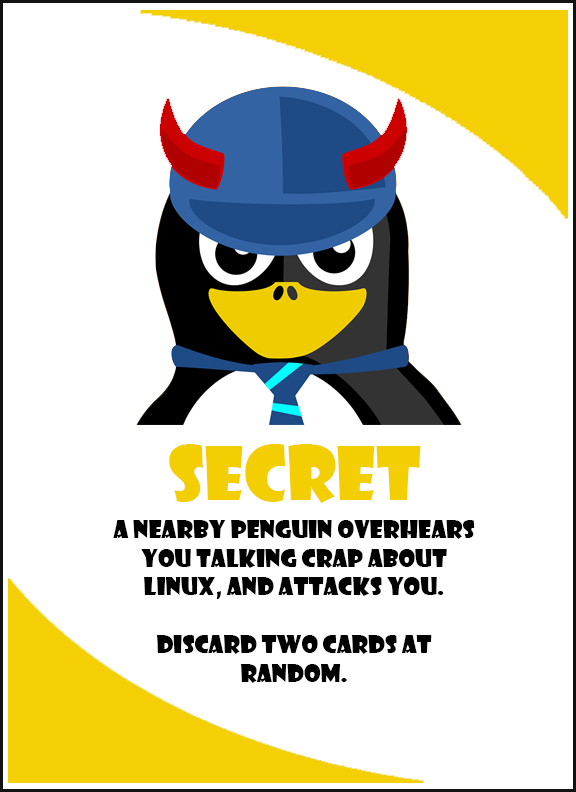
<style>
.page{position:relative;width:576px;height:792px;background:#ffffff}
.page>*{position:absolute;margin:0}
.t1{font:72px "ShowcardGothic-Reg";color:#f3ce03}
.t2{font:24px "ShowcardGothic-Reg";color:#000000}
</style>
<div class="page">
<p class="t1" style="left:169px;top:444px;width:252px;height:59px">SECRET</p>
<p class="t2" style="left:113px;top:520px;width:362px;height:163px;text-align:center">a nearby penguin overhears you talking crap about linux, and attacks you. <br><br>Discard two cards at random.</p>
</div>
